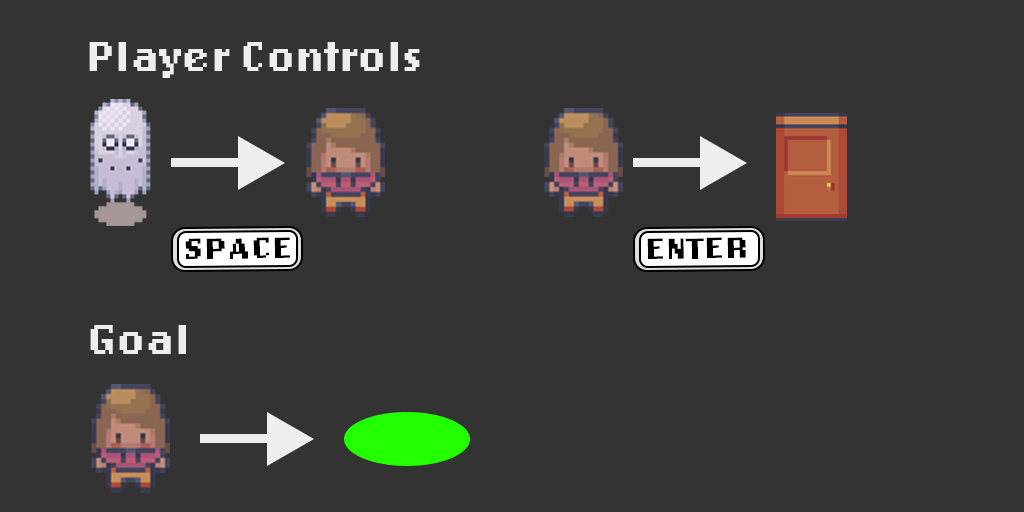
<style>
.page{position:relative;width:1024px;height:512px;background:#333333}
.page>*{position:absolute;margin:0}
.t1{font:44px "LoRes12OT-Bold";color:#eeeeee}
.t2{font:30.3px "LoRes12OT-Bold";color:#000000;scale:1.18 1}
</style>
<div class="page">
<p class="t1" style="left:89px;top:42px;width:331px;height:36px">Player Controls</p>
<p class="t2" style="left:185px;top:237px;width:105px;height:22px;rotate:-1deg">SPACE</p>
<p class="t2" style="left:647px;top:237px;width:99px;height:22px;rotate:-1deg">ENTER</p>
<p class="t1" style="left:90px;top:325px;width:96px;height:29px">Goal</p>
</div>
